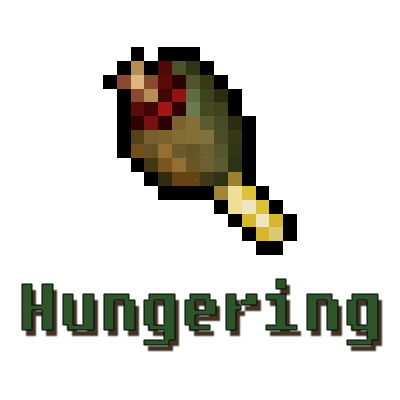
<style>
.page{position:relative;width:400px;height:400px;background:#ffffff}
.page>*{position:absolute;margin:0}
.t1{font:65px "Fixedsys";color:#2e552a}
</style>
<div class="page">
<p class="t1" style="left:22px;top:279px;width:356px;height:66px">Hungering</p>
</div>
